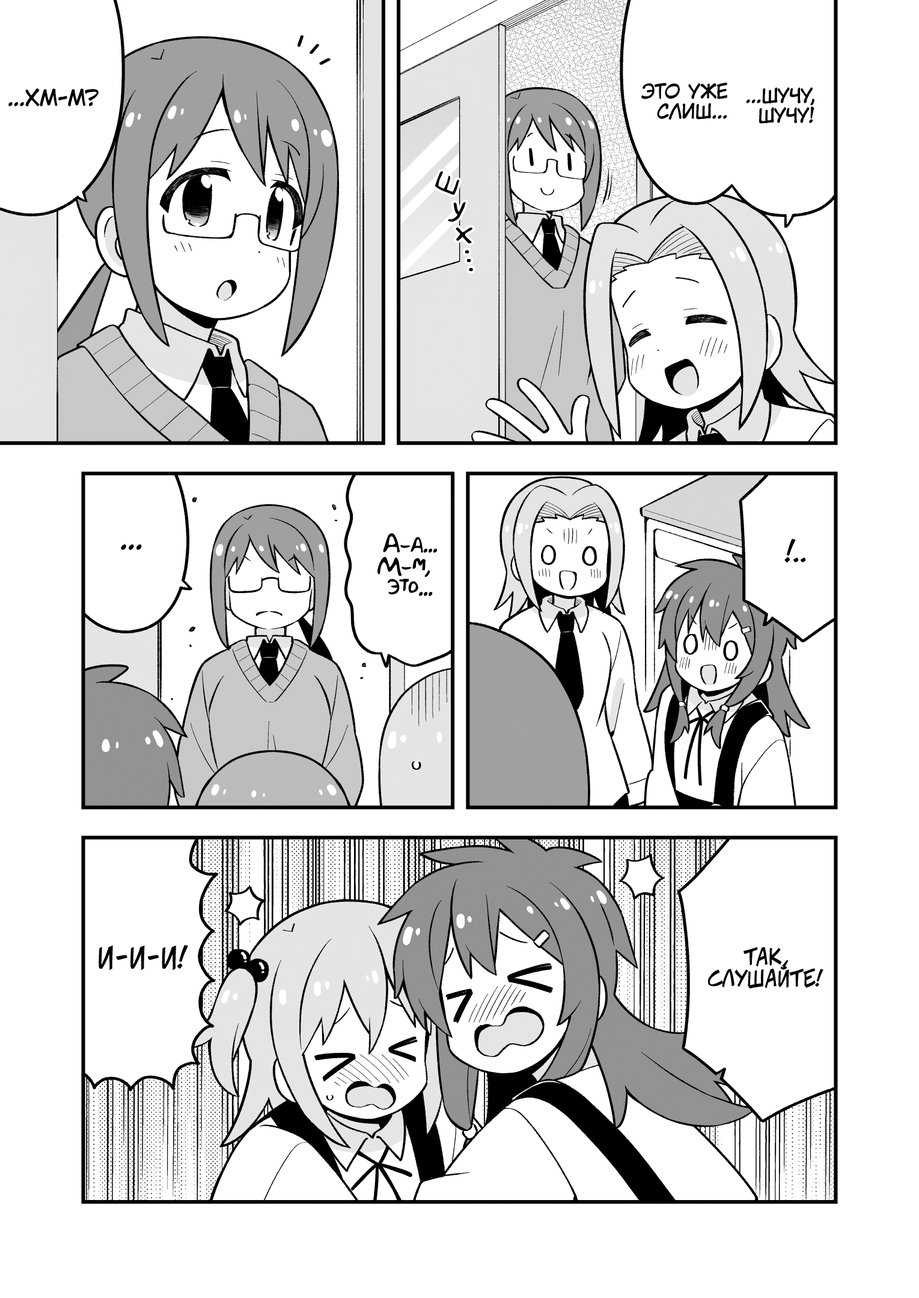
<style>
.page{position:relative;width:919px;height:1298px;background:#ffffff}
.page>*{position:absolute;margin:0}
.t1{font:21.6px "KuraiVoice2";color:#000000;text-transform:uppercase}
.t2{font:19.8px "KuraiVoice2";color:#000000;text-transform:uppercase}
.t3{font:32.4px "v_Augie";color:#000000}
.t4{font:21.6px "AkbarPlain";color:#000000}
.t5{font:28.8px "KuraiVoice2";color:#000000;text-transform:uppercase}
.t6{font:21.6px "v_CCJeffCampbell";color:#000000;text-transform:uppercase}
.t7{font:28.8px "v_CCJeffCampbell";color:#000000;text-transform:uppercase}
</style>
<div class="page">
<p class="t1" style="left:8px;top:88px;width:91px;height:18px">...Хм-м?</p>
<p class="t2" style="left:641px;top:82px;width:86px;height:38px;text-align:center">Это уже<br>слиш...</p>
<p class="t2" style="left:746px;top:87px;width:68px;height:37px;text-align:center">...Шучу,<br>шучу!</p>
<p class="t3" style="left:434px;top:171px;width:26px;height:24px;rotate:24deg">ш</p>
<p class="t3" style="left:448px;top:201px;width:18px;height:21px;rotate:21deg">у</p>
<p class="t3" style="left:455px;top:227px;width:18px;height:17px;rotate:10deg">х</p>
<p class="t3" style="left:464px;top:250px;width:5px;height:4px">.</p>
<p class="t3" style="left:466px;top:258px;width:5px;height:5px">.</p>
<p class="t3" style="left:469px;top:267px;width:4px;height:5px">.</p>
<p class="t4" style="left:377px;top:533px;width:60px;height:63px;text-align:center">А-а...<br>М-м,<br>это...</p>
<p class="t5" style="left:121px;top:544px;width:21px;height:6px">...</p>
<p class="t6" style="left:784px;top:538px;width:22px;height:24px"><span class="t7">!</span>..</p>
<p class="t7" style="left:99px;top:945px;width:89px;height:25px">И-и-и!</p>
<p class="t6" style="left:708px;top:947px;width:115px;height:41px;text-align:center">Так,<br>слушайте!</p>
</div>
